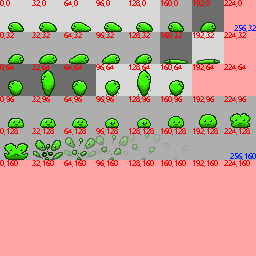
<style>
.page{position:relative;width:256px;height:256px;background:#ffa4a4}
.page>*{position:absolute;margin:0}
.t1{font:8.3px "Gadugi";color:#ff0000}
.t2{font:8.3px "Gadugi";color:#001eff}
</style>
<div class="page">
<p class="t1" style="left:0px;top:0px;width:10px;height:7px">0,0</p>
<p class="t1" style="left:32px;top:0px;width:14px;height:7px">32,0</p>
<p class="t1" style="left:64px;top:0px;width:14px;height:7px">64,0</p>
<p class="t1" style="left:96px;top:0px;width:14px;height:7px">96,0</p>
<p class="t1" style="left:129px;top:0px;width:17px;height:7px">128,0</p>
<p class="t1" style="left:161px;top:0px;width:17px;height:7px">160,0</p>
<p class="t1" style="left:193px;top:0px;width:17px;height:7px">192,0</p>
<p class="t1" style="left:224px;top:0px;width:18px;height:7px">224,0</p>
<p class="t2" style="left:234px;top:25px;width:22px;height:7px">256,32</p>
<p class="t1" style="left:0px;top:32px;width:14px;height:7px">0,32</p>
<p class="t1" style="left:32px;top:32px;width:18px;height:7px">32,32</p>
<p class="t1" style="left:64px;top:32px;width:18px;height:7px">64,32</p>
<p class="t1" style="left:96px;top:32px;width:18px;height:7px">96,32</p>
<p class="t1" style="left:129px;top:32px;width:21px;height:7px">128,32</p>
<p class="t1" style="left:161px;top:32px;width:21px;height:7px">160,32</p>
<p class="t1" style="left:193px;top:32px;width:21px;height:7px">192,32</p>
<p class="t1" style="left:224px;top:32px;width:22px;height:7px">224,32</p>
<p class="t1" style="left:0px;top:64px;width:14px;height:7px">0,64</p>
<p class="t1" style="left:32px;top:64px;width:18px;height:7px">32,64</p>
<p class="t1" style="left:64px;top:64px;width:18px;height:7px">64,64</p>
<p class="t1" style="left:96px;top:64px;width:18px;height:7px">96,64</p>
<p class="t1" style="left:129px;top:64px;width:21px;height:7px">128,64</p>
<p class="t1" style="left:161px;top:64px;width:21px;height:7px">160,64</p>
<p class="t1" style="left:193px;top:64px;width:21px;height:7px">192,64</p>
<p class="t1" style="left:224px;top:64px;width:22px;height:7px">224,64</p>
<p class="t1" style="left:0px;top:96px;width:14px;height:7px">0,96</p>
<p class="t1" style="left:32px;top:96px;width:18px;height:7px">32,96</p>
<p class="t1" style="left:64px;top:96px;width:18px;height:7px">64,96</p>
<p class="t1" style="left:96px;top:96px;width:18px;height:7px">96,96</p>
<p class="t1" style="left:129px;top:96px;width:21px;height:7px">128,96</p>
<p class="t1" style="left:161px;top:96px;width:21px;height:7px">160,96</p>
<p class="t1" style="left:193px;top:96px;width:21px;height:7px">192,96</p>
<p class="t1" style="left:224px;top:96px;width:22px;height:7px">224,96</p>
<p class="t1" style="left:0px;top:128px;width:18px;height:7px">0,128</p>
<p class="t1" style="left:32px;top:128px;width:22px;height:7px">32,128</p>
<p class="t1" style="left:64px;top:128px;width:22px;height:7px">64,128</p>
<p class="t1" style="left:96px;top:128px;width:22px;height:7px">96,128</p>
<p class="t1" style="left:129px;top:128px;width:25px;height:7px">128,128</p>
<p class="t1" style="left:161px;top:128px;width:25px;height:7px">160,128</p>
<p class="t1" style="left:193px;top:128px;width:25px;height:7px">192,128</p>
<p class="t1" style="left:224px;top:128px;width:26px;height:7px">224,128</p>
<p class="t1" style="left:0px;top:160px;width:18px;height:7px">0,160</p>
<p class="t1" style="left:32px;top:160px;width:22px;height:7px">32,160</p>
<p class="t1" style="left:64px;top:160px;width:22px;height:7px">64,160</p>
<p class="t1" style="left:96px;top:160px;width:22px;height:7px">96,160</p>
<p class="t1" style="left:129px;top:160px;width:25px;height:7px">128,160</p>
<p class="t1" style="left:161px;top:160px;width:25px;height:7px">160,160</p>
<p class="t1" style="left:193px;top:160px;width:25px;height:7px">192,160</p>
<p class="t1" style="left:224px;top:160px;width:26px;height:7px">224,160</p>
<p class="t2" style="left:230px;top:153px;width:26px;height:7px">256,160</p>
</div>
